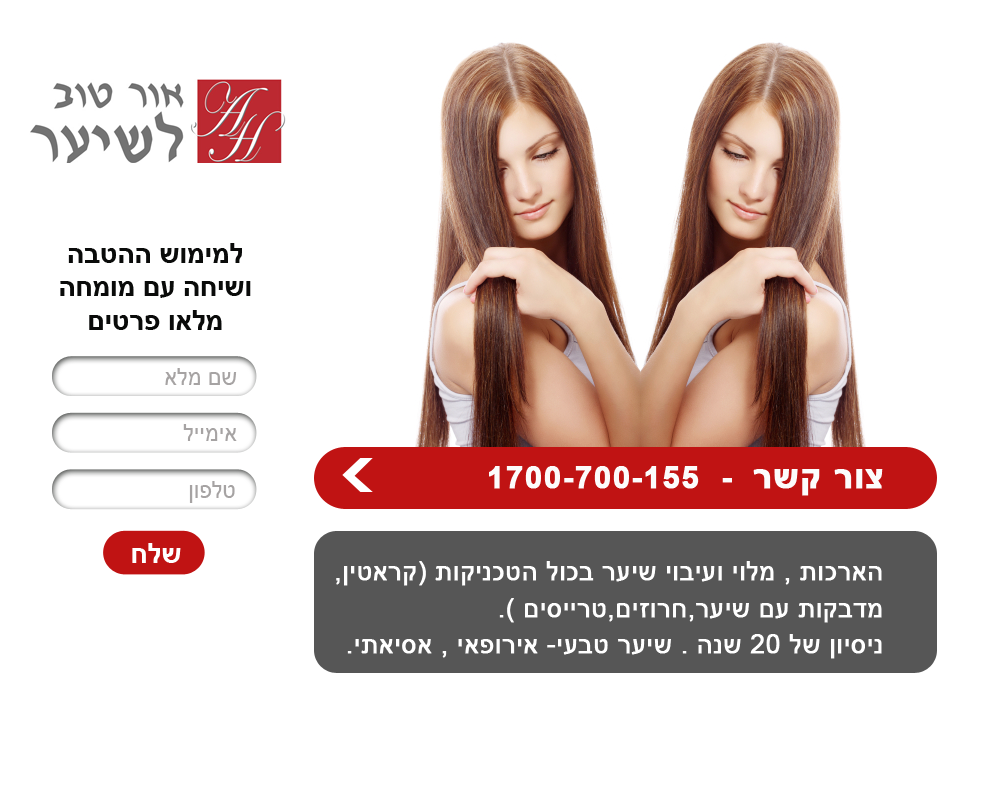
<style>
.page{position:relative;width:1000px;height:800px;background:#ffffff}
.page>*{position:absolute;margin:0}
.t1{font:27.8px "Arial-BoldMT";color:#0a0b0a}
.t2{font:22.8px "ArialMT";color:#9e9fa0}
.t3{font:31.4px "Arial-BoldMT";letter-spacing:0.02em;color:#fcfcfc;font-weight:bold}
.t4{font:35.4px "Arial-BoldMT";letter-spacing:0.02em;color:#fcfcfc;font-weight:bold}
.t5{font:27.8px "Arial-BoldMT";color:#ffffff}
.t6{font:26.4px/36.3px "ArialMT";color:#ffffff;font-weight:bold}
</style>
<div class="page">
<p class="t1" style="left:60px;top:243px;width:191px;height:87px;text-align:center">למימוש ההטבה<br>ושיחה עם מומחה<br>מלאו פרטים</p>
<p class="t2" style="left:165px;top:368px;width:72px;height:17px">שם מלא</p>
<p class="t2" style="left:183px;top:424px;width:54px;height:17px">אימייל</p>
<p class="t3" style="left:489px;top:466px;width:394px;height:30px"><span class="t4">צור קשר</span>  -  1700-700-155</p>
<p class="t2" style="left:189px;top:481px;width:46px;height:22px">טלפון</p>
<p class="t5" style="left:132px;top:543px;width:49px;height:20px">שלח</p>
<p class="t6" style="left:336px;top:561px;width:546px;height:98px">הארכות , מלוי ועיבוי שיער בכול הטכניקות (קראטין,<br>מדבקות עם שיער,חרוזים,טרייסים ).<br>ניסיון של 20 שנה . שיער טבעי- אירופאי , אסיאתי.</p>
</div>
